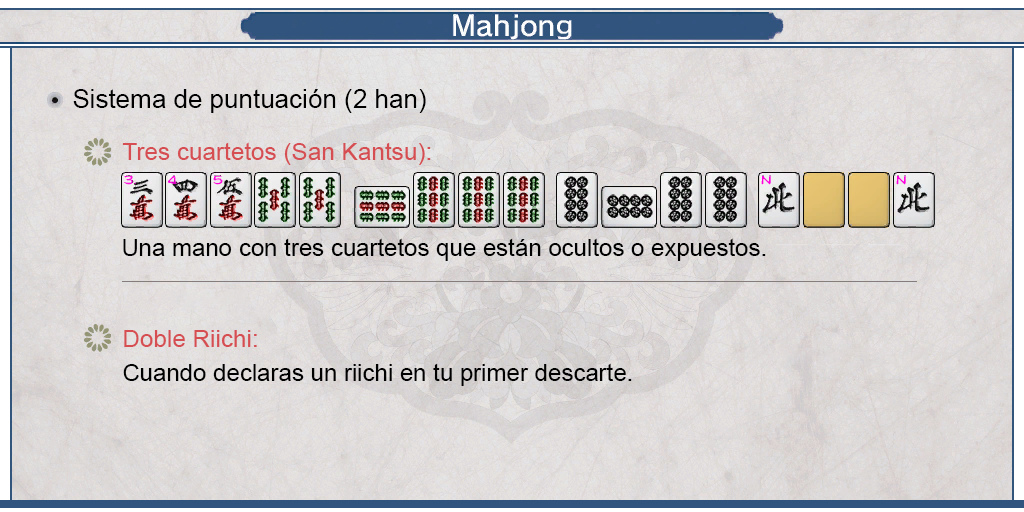
<style>
.page{position:relative;width:1024px;height:512px}
.page>*{position:absolute;margin:0}
.t1{font:26px "ArialMT";color:#000000}
.t2{font:24px "ArialMT";color:#d64d52}
.t3{font:24px "ArialMT";color:#000000}
</style>
<div class="page">
<p class="t1" style="left:73px;top:89px;width:353px;height:24px">Sistema de puntuación (2 han)</p>
<p class="t2" style="left:122px;top:142px;width:309px;height:23px">Tres cuartetos (San Kantsu):</p>
<p class="t3" style="left:123px;top:238px;width:643px;height:23px">Una mano con tres cuartetos que están ocultos o expuestos.</p>
<p class="t2" style="left:124px;top:330px;width:133px;height:17px">Doble Riichi:</p>
<p class="t3" style="left:123px;top:363px;width:509px;height:23px">Cuando declaras un riichi en tu primer descarte.</p>
</div>
